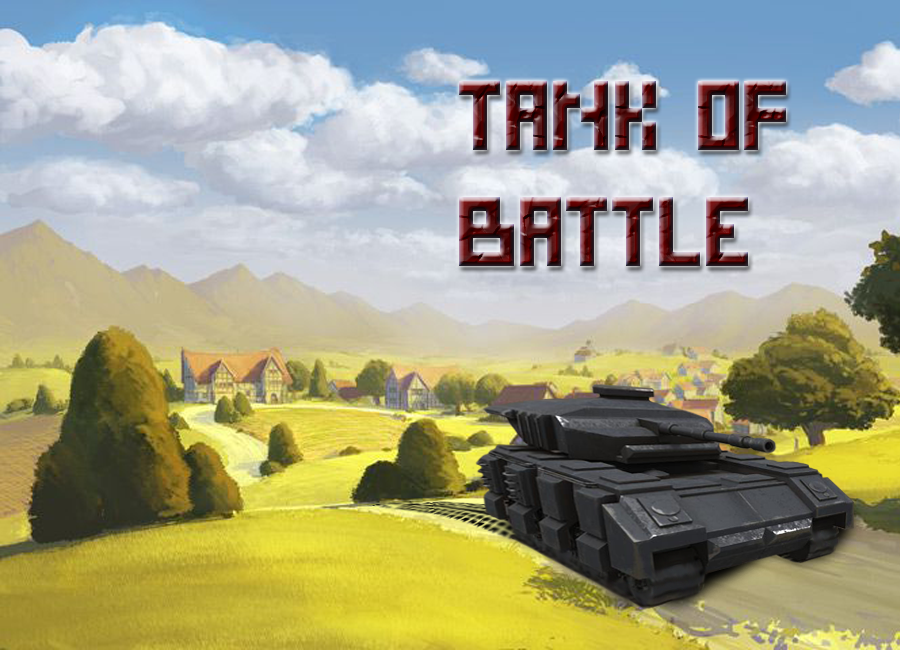
<style>
.page{position:relative;width:900px;height:650px}
.page>*{position:absolute;margin:0}
.t1{font:96.6px "DSPixelCyr"}
</style>
<div class="page">
<p class="t1" style="left:459px;top:81px;width:327px;height:185px">Tank of <br>Battle</p>
</div>
